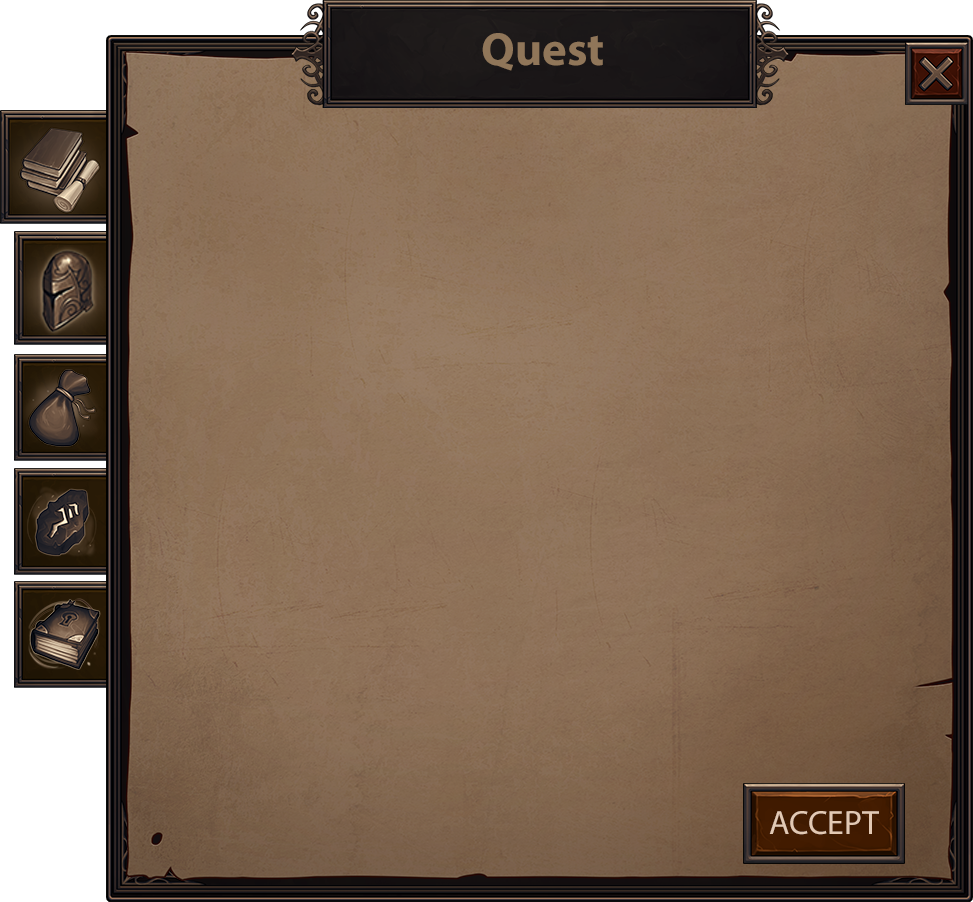
<style>
.page{position:relative;width:973px;height:902px}
.page>*{position:absolute;margin:0}
.t1{font:46.8px "MyriadPro-Bold";color:#907659}
.t2{font:33.8px "MyriadPro-Regular";color:#e2c9b4}
</style>
<div class="page">
<p class="t1" style="left:482px;top:33px;width:121px;height:38px">Quest</p>
<p class="t2" style="left:769px;top:811px;width:110px;height:24px">ACCEPT</p>
</div>
